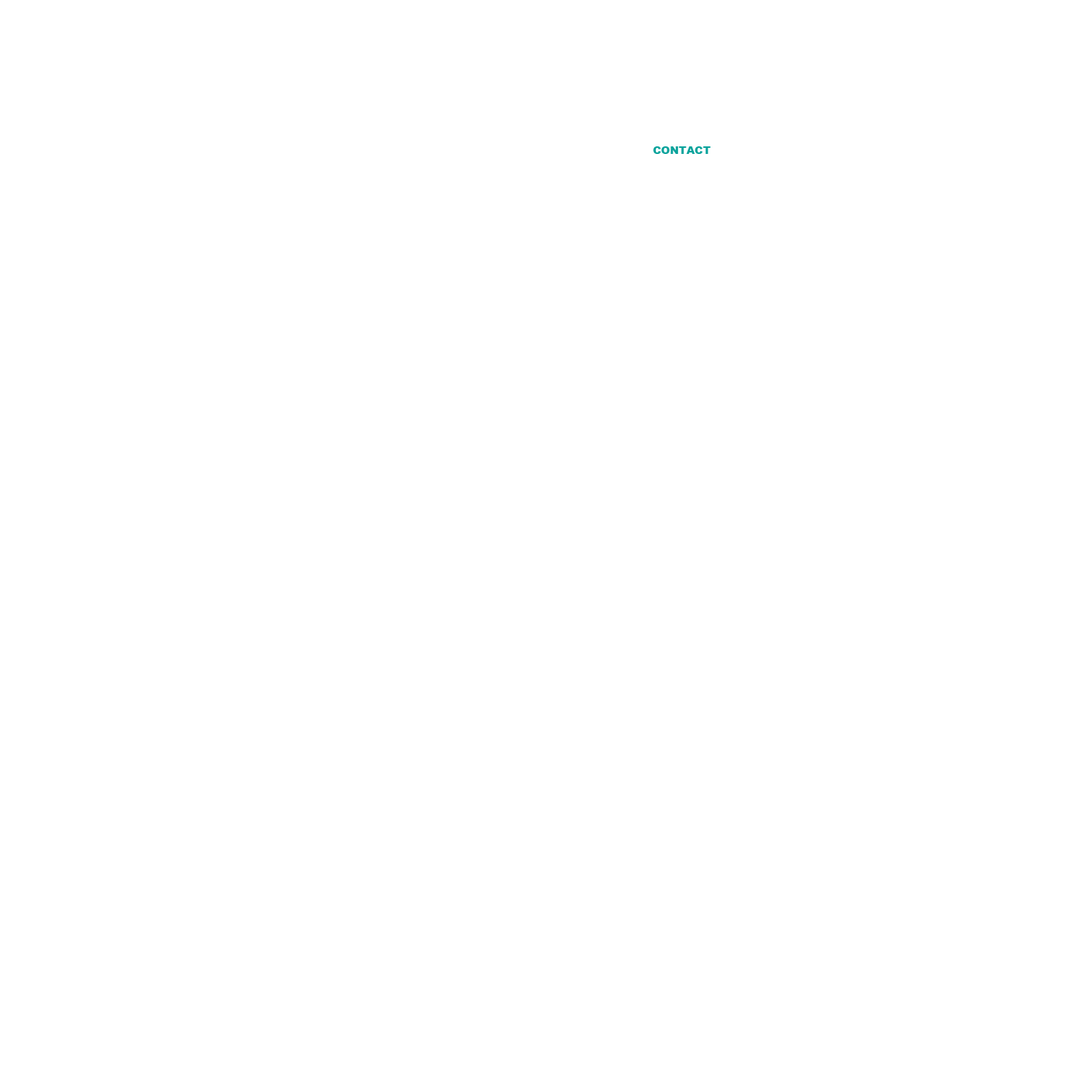
<style>
.page{position:relative;width:1092px;height:1092px;background:#ffffff}
.page>*{position:absolute;margin:0}
.t1{font:10.6px "Arial-Black";color:#0ba39c}
</style>
<div class="page">
<p class="t1" style="left:653px;top:146px;width:58px;height:8px">CONTACT</p>
</div>
